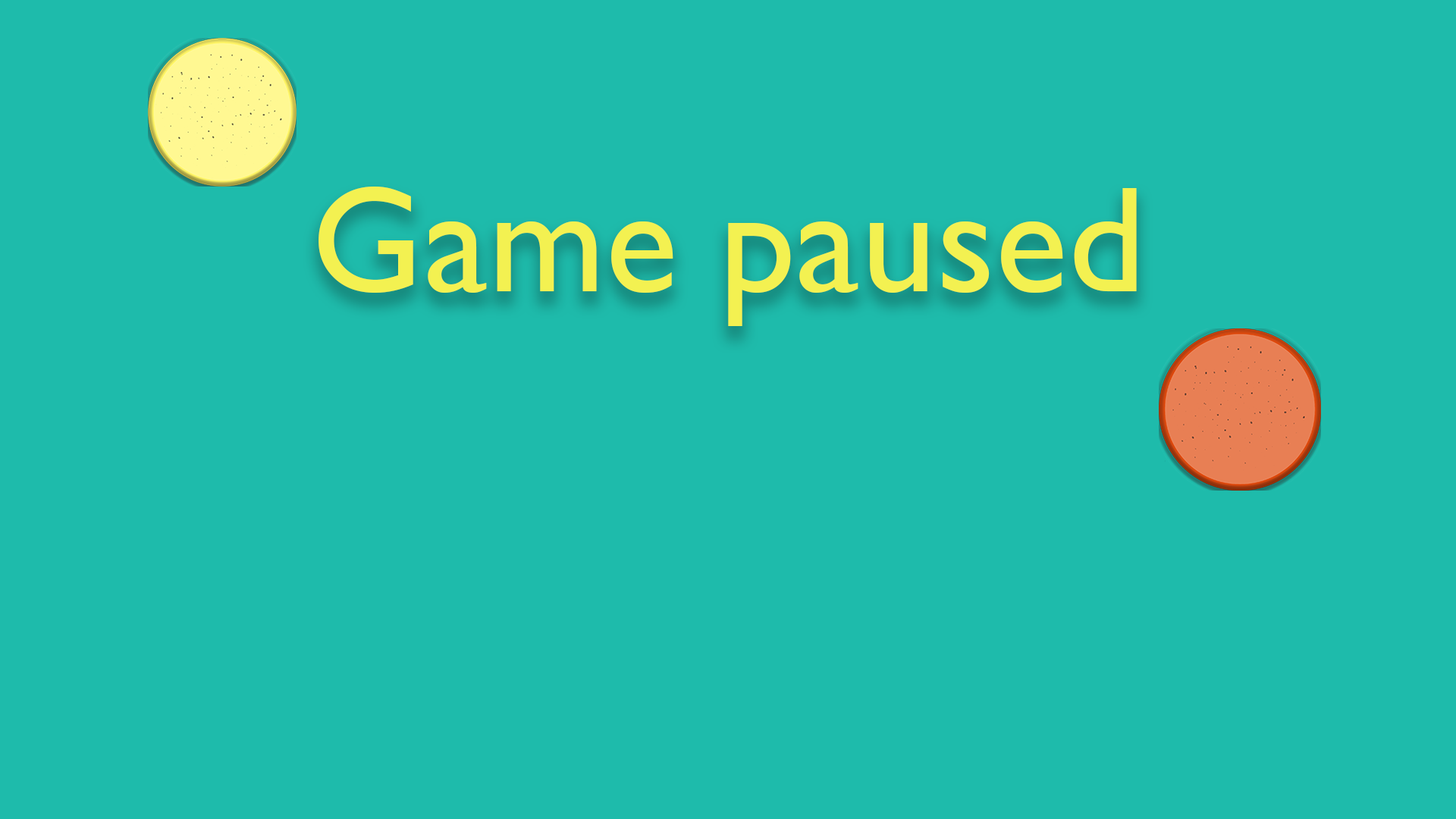
<style>
.page{position:relative;width:1456px;height:819px;background:#1ebbab}
.page>*{position:absolute;margin:0}
.t1{font:151.7px "GillSansMT";color:#f3f151}
</style>
<div class="page">
<p class="t1" style="left:318px;top:187px;width:819px;height:139px">Game paused</p>
</div>
